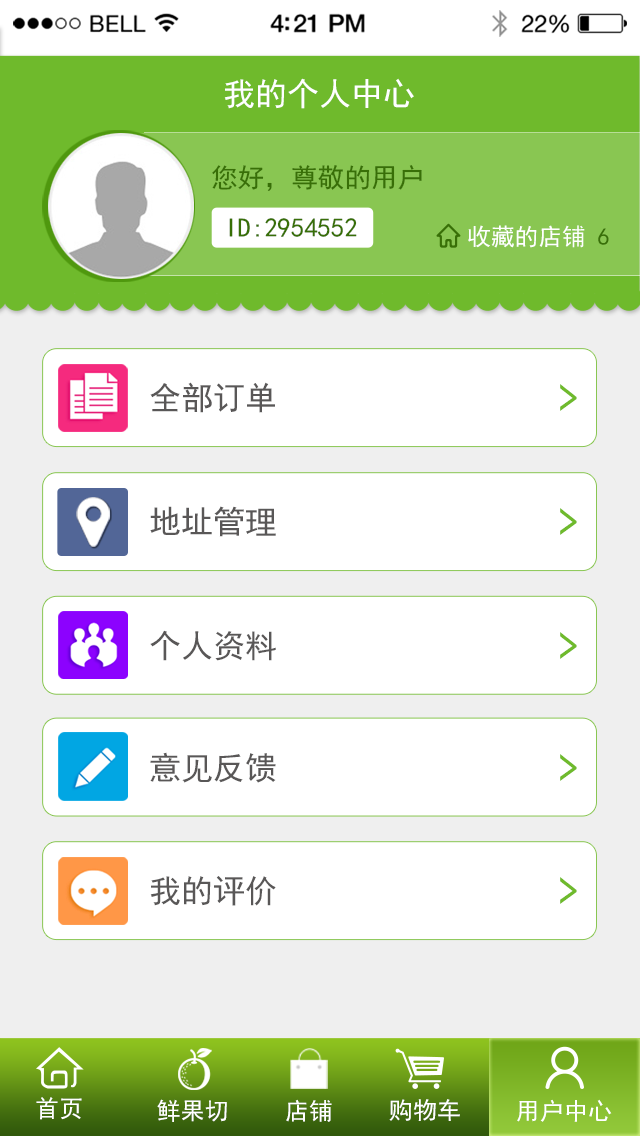
<style>
.page{position:relative;width:640px;height:1136px;background:#ffffff}
.page>*{position:absolute;margin:0}
.t1{font:32px "SimHei";color:#ffffff}
.t2{font:26.7px "SimHei";color:#386f07}
.t3{font:23.7px "SimHei";color:#ffffff}
.t4{font:23.7px "SimHei";color:#386f07}
.t5{font:32px "SimHei";color:#595757}
.t6{font:51.3px "MicrosoftYaHei";letter-spacing:0.1em;color:#6fba2c;scale:0.69 1}
.t7{font:24.1px "SimHei";color:#ffffff}
</style>
<div class="page">
<p class="t1" style="left:224px;top:78px;width:190px;height:31px">我的个人中心</p>
<p class="t2" style="left:212px;top:165px;width:210px;height:26px">您好，尊敬的用户</p>
<p class="t2" style="left:229px;top:218px;width:128px;height:19px">ID:2954552</p>
<p class="t3" style="left:468px;top:225px;width:141px;height:23px">收藏的店铺 <span class="t4">6</span></p>
<p class="t5" style="left:150px;top:382px;width:125px;height:31px">全部订单</p>
<p class="t6" style="left:560px;top:384px;width:17px;height:27px">&gt;</p>
<p class="t5" style="left:150px;top:506px;width:126px;height:31px">地址管理</p>
<p class="t6" style="left:560px;top:508px;width:17px;height:27px">&gt;</p>
<p class="t5" style="left:150px;top:630px;width:126px;height:31px">个人资料</p>
<p class="t6" style="left:560px;top:632px;width:17px;height:27px">&gt;</p>
<p class="t5" style="left:150px;top:752px;width:126px;height:31px">意见反馈</p>
<p class="t6" style="left:560px;top:754px;width:17px;height:27px">&gt;</p>
<p class="t5" style="left:150px;top:876px;width:126px;height:30px">我的评价</p>
<p class="t6" style="left:560px;top:877px;width:17px;height:27px">&gt;</p>
<p class="t7" style="left:36px;top:1097px;width:46px;height:23px">首页</p>
<p class="t7" style="left:157px;top:1099px;width:70px;height:23px">鲜果切</p>
<p class="t7" style="left:286px;top:1099px;width:46px;height:23px">店铺</p>
<p class="t7" style="left:389px;top:1099px;width:71px;height:22px">购物车</p>
<p class="t7" style="left:517px;top:1099px;width:95px;height:23px">用户中心</p>
</div>
